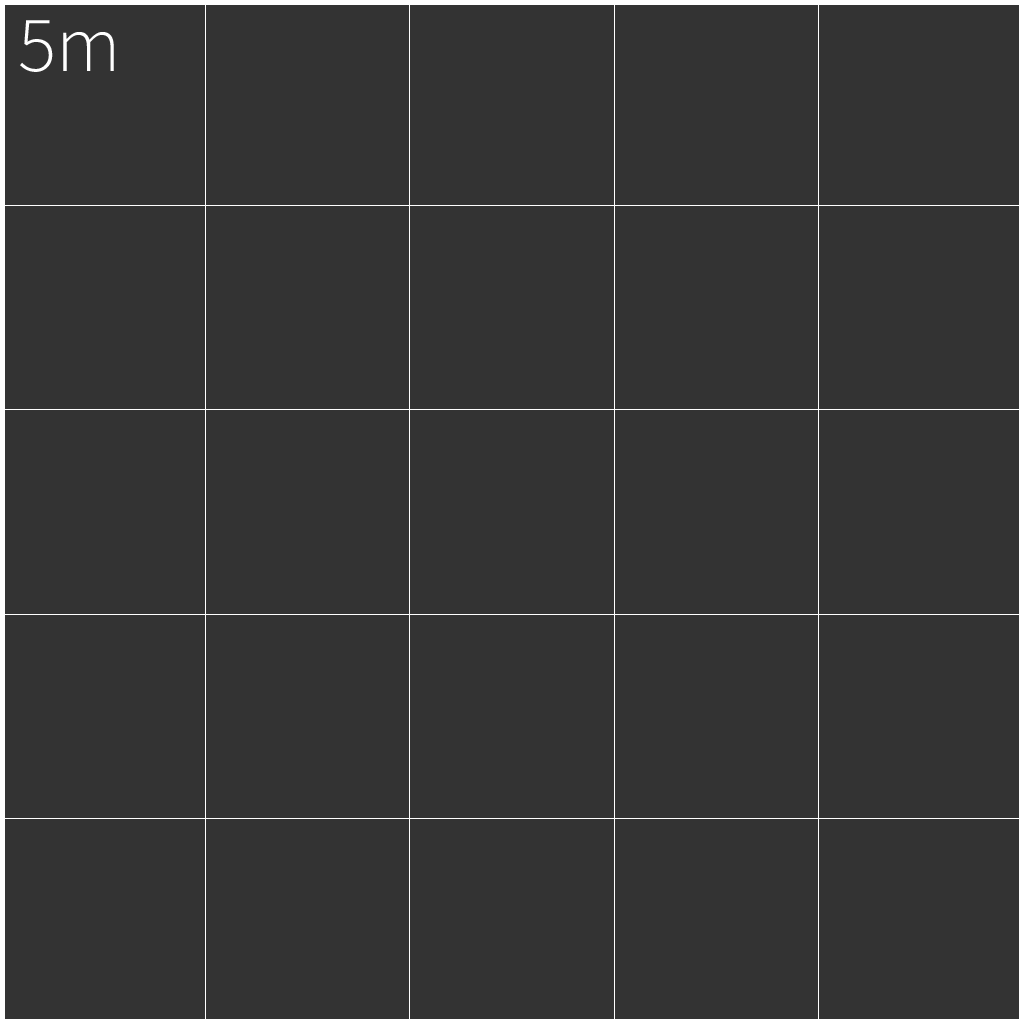
<style>
.page{position:relative;width:1024px;height:1024px;background:#333333}
.page>*{position:absolute;margin:0}
.t1{font:72px "NotoSansTC-ExtraLight";color:#ffffff}
</style>
<div class="page">
<p class="t1" style="left:20px;top:20px;width:94px;height:52px">5m</p>
</div>
